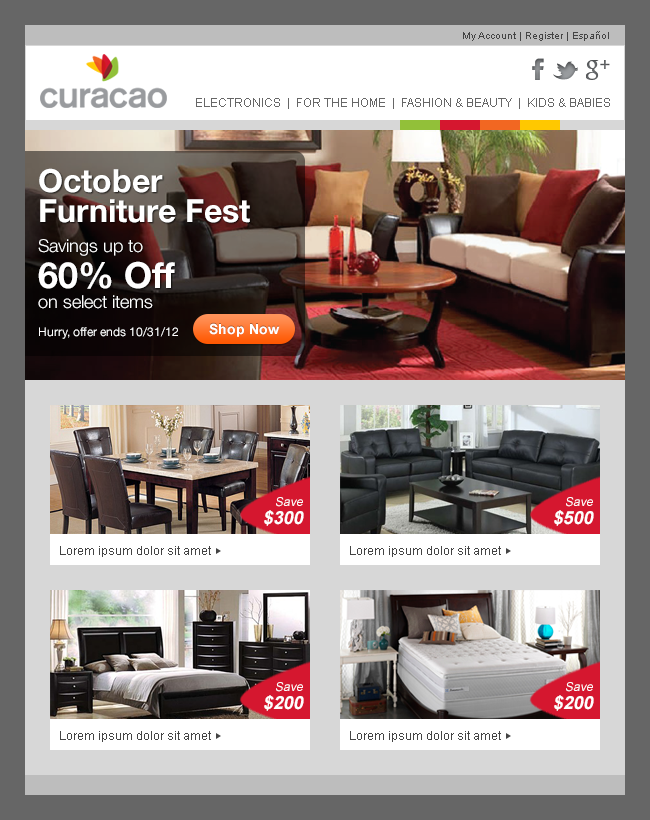
<style>
.page{position:relative;width:650px;height:820px}
.page>*{position:absolute;margin:0}
.t1{font:10px "ArialMT";color:#444444}
.t2{font:12px "ArialMT";color:#666666}
.t3{font:18px/20px "HelveticaNeue-Light";color:#ffffff}
.t4{font:32px/48px "HelveticaNeue-Bold";color:#ffffff}
.t5{font:32px/30px "HelveticaNeue-Bold";color:#ffffff}
.t6{font:18px/30px "HelveticaNeue-Light";color:#ffffff}
.t7{font:36px/36px "HelveticaNeue-Bold";color:#ffffff}
.t8{font:12px "HelveticaNeue-Roman";color:#ffffff}
.t9{font:12px/18px "ArialMT";color:#fefefe;font-style:italic}
.t10{font:18px/18px "Arial-BoldMT";color:#fefefe;font-style:italic}
.t11{font:12px "ArialMT";color:#444444}
</style>
<div class="page">
<p class="t1" style="left:463px;top:31px;width:146px;height:10px">My Account | Register | Español</p>
<p class="t2" style="left:196px;top:98px;width:414px;height:11px">ELECTRONICS  |  FOR THE HOME  |  FASHION &amp; BEAUTY  |  KIDS &amp; BABIES</p>
<p class="t3" style="left:38px;top:168px;width:212px;height:141px"><span class="t4">October <br></span><span class="t5">Furniture Fest<br></span><span class="t6">Savings up to <br></span><span class="t7">60% Off <br></span>on select items</p>
<p class="t8" style="left:39px;top:327px;width:139px;height:12px">Hurry, offer ends 10/31/12</p>
<p class="t9" style="left:264px;top:497px;width:40px;height:29px;text-align:right">Save<br><span class="t10">$300</span></p>
<p class="t9" style="left:554px;top:497px;width:40px;height:29px;text-align:right">Save<br><span class="t10">$500</span></p>
<p class="t11" style="left:60px;top:546px;width:151px;height:11px">Lorem ipsum dolor sit amet</p>
<p class="t11" style="left:350px;top:546px;width:151px;height:11px">Lorem ipsum dolor sit amet</p>
<p class="t9" style="left:264px;top:682px;width:40px;height:29px;text-align:right">Save<br><span class="t10">$200</span></p>
<p class="t9" style="left:554px;top:682px;width:40px;height:29px;text-align:right">Save<br><span class="t10">$200</span></p>
<p class="t11" style="left:60px;top:731px;width:151px;height:11px">Lorem ipsum dolor sit amet</p>
<p class="t11" style="left:350px;top:731px;width:151px;height:11px">Lorem ipsum dolor sit amet</p>
</div>
